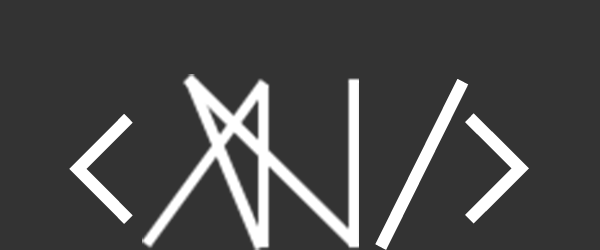
<style>
.page{position:relative;width:600px;height:250px;background:#333333}
.page>*{position:absolute;margin:0}
.t1{font:219.4px "AnonymousPro";letter-spacing:0.025em;color:#ffffff}
</style>
<div class="page">
<p class="t1" style="left:375px;top:79px;width:94px;height:171px">/</p>
<p class="t1" style="left:465px;top:113px;width:64px;height:111px">&gt;</p>
<p class="t1" style="left:69px;top:114px;width:64px;height:110px">&lt;</p>
</div>
